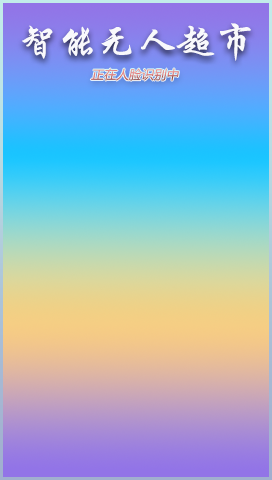
<style>
.page{position:relative;width:272px;height:480px}
.page>*{position:absolute;margin:0}
.t1{font:39.6px "STXingkai";color:#f9f9fc}
.t2{font:12.5px "MicrosoftYaHei";color:#e48686;font-style:italic}
</style>
<div class="page">
<p class="t1" style="left:22px;top:23px;width:229px;height:38px">智能无人超市</p>
<p class="t2" style="left:90px;top:68px;width:89px;height:13px">正在人脸识别中</p>
</div>
